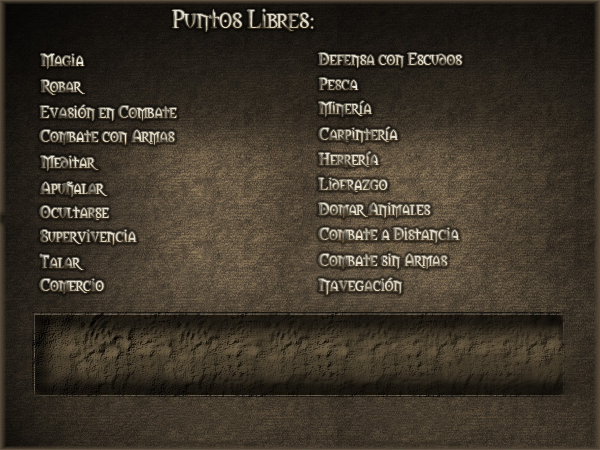
<style>
.page{position:relative;width:600px;height:450px}
.page>*{position:absolute;margin:0}
.t1{font:24px "Morpheus"}
.t2{font:16px "Morpheus"}
</style>
<div class="page">
<p class="t1" style="left:172px;top:9px;width:142px;height:23px">Puntos Libres:</p>
<p class="t2" style="left:41px;top:54px;width:44px;height:15px">Magia</p>
<p class="t2" style="left:318px;top:53px;width:144px;height:15px">Defensa con Escudos</p>
<p class="t2" style="left:319px;top:78px;width:40px;height:12px">Pesca</p>
<p class="t2" style="left:41px;top:80px;width:44px;height:15px">Robar</p>
<p class="t2" style="left:319px;top:101px;width:53px;height:16px">Minería</p>
<p class="t2" style="left:40px;top:105px;width:137px;height:16px">Evasión en Combate</p>
<p class="t2" style="left:40px;top:130px;width:135px;height:15px">Combate con Armas</p>
<p class="t2" style="left:319px;top:127px;width:79px;height:16px">Carpintería</p>
<p class="t2" style="left:41px;top:156px;width:58px;height:15px">Meditar</p>
<p class="t2" style="left:319px;top:152px;width:60px;height:15px">Herrería</p>
<p class="t2" style="left:40px;top:182px;width:68px;height:15px">Apuñalar</p>
<p class="t2" style="left:319px;top:178px;width:69px;height:14px">Liderazgo</p>
<p class="t2" style="left:40px;top:206px;width:69px;height:14px">Ocultarse</p>
<p class="t2" style="left:318px;top:203px;width:113px;height:15px">Domar Animales</p>
<p class="t2" style="left:40px;top:230px;width:97px;height:15px">Supervivencia</p>
<p class="t2" style="left:319px;top:228px;width:141px;height:15px">Combate a Distancia</p>
<p class="t2" style="left:40px;top:254px;width:44px;height:16px">Talar</p>
<p class="t2" style="left:319px;top:254px;width:129px;height:15px">Combate sin Armas</p>
<p class="t2" style="left:40px;top:279px;width:64px;height:15px">Comercio</p>
<p class="t2" style="left:319px;top:278px;width:83px;height:17px">Navegación</p>
</div>
